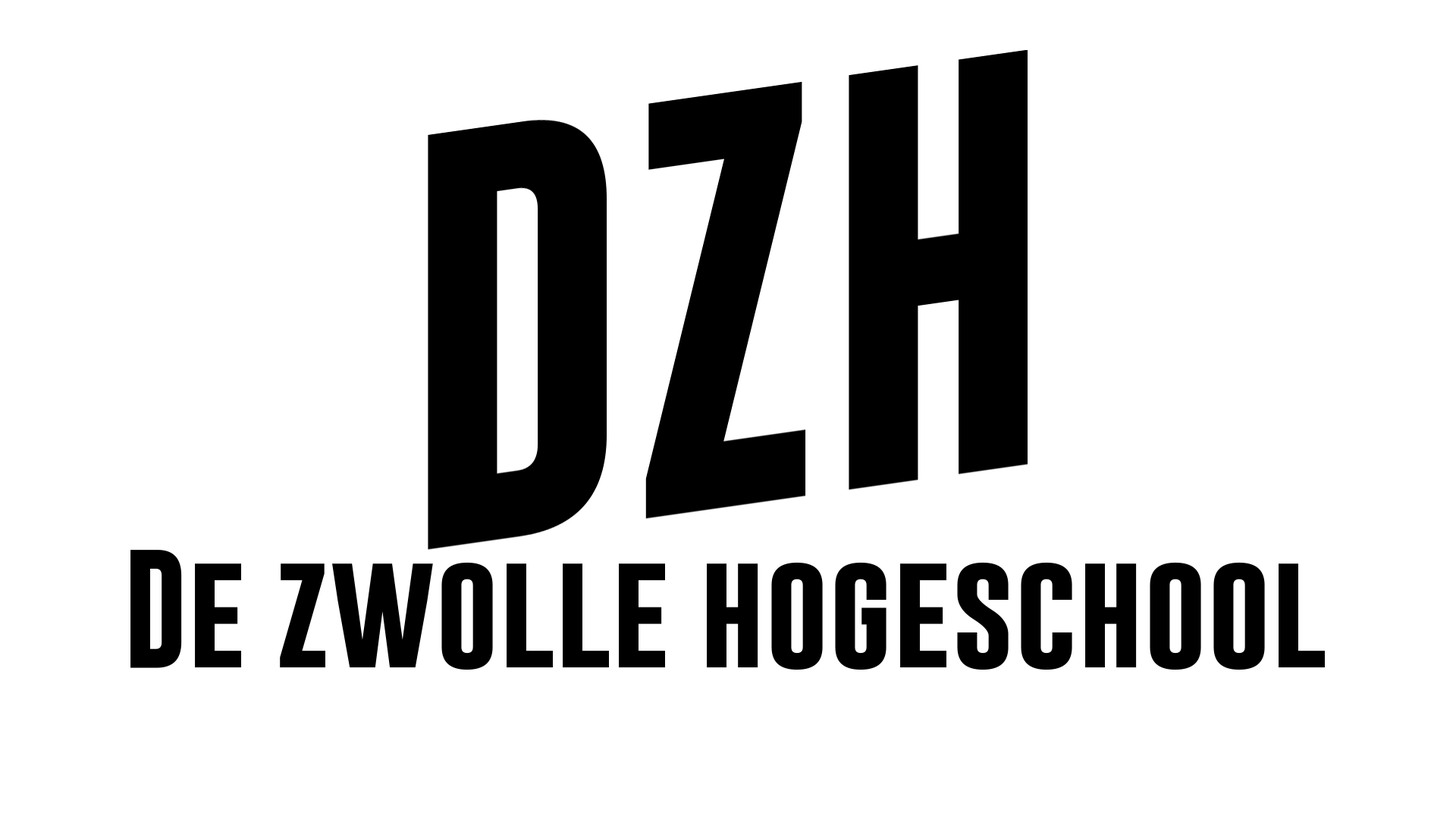
<style>
.page{position:relative;width:1456px;height:819px;background:#ffffff}
.page>*{position:absolute;margin:0}
.t1{font:120.3px "GoboldBold";color:#000000}
</style>
<div class="page">
<p class="t1" style="left:130px;top:550px;width:1195px;height:120px">De zwolle hogeschool</p>
</div>
